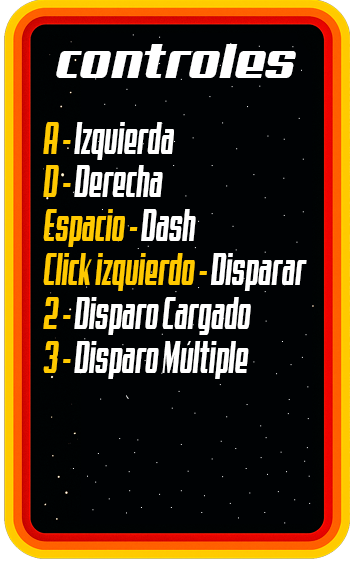
<style>
.page{position:relative;width:350px;height:566px;background:#000204}
.page>*{position:absolute;margin:0}
.t1{font:49.1px "Aero";color:#ffffff}
.t2{font:45.9px/43.8px "Aero";color:#ffc900;scale:0.46 1}
.t3{font:45.9px/43.8px "Aero";color:#ffffff;scale:0.46 1}
</style>
<div class="page">
<p class="t1" style="left:56px;top:44px;width:240px;height:34px">controles</p>
<p class="t2" style="left:43px;top:122px;width:264px;height:257px">A -<span class="t3"> Izquierda<br></span>D -<span class="t3"> Derecha<br></span>Espacio -<span class="t3"> Dash<br></span>Click izquierdo -<span class="t3"> Disparar<br></span>2 -<span class="t3"> Disparo Cargado<br></span>3 -<span class="t3"> Disparo Múltiple</span></p>
</div>
